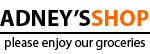
<style>
.page{position:relative;width:150px;height:54px;background:#ffffff}
.page>*{position:absolute;margin:0}
.t1{font:23px "MyriadPro-Bold";color:#000000}
.t2{font:23px "MyriadPro-Bold";color:#f76900}
.t3{font:13px "MyriadPro-Regular";color:#000000}
</style>
<div class="page">
<p class="t1" style="left:0px;top:10px;width:149px;height:16px">ADNEY’S<span class="t2">SHOP</span></p>
<p class="t3" style="left:5px;top:37px;width:140px;height:13px">please enjoy our groceries</p>
</div>
